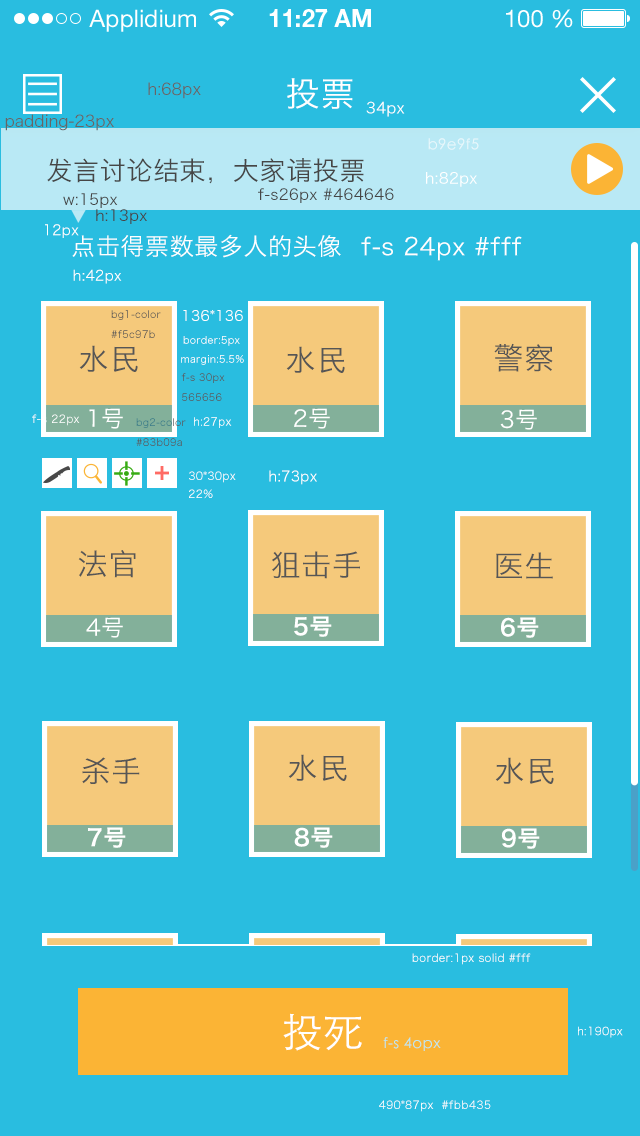
<style>
.page{position:relative;width:640px;height:1136px;background:#29bde0}
.page>*{position:absolute;margin:0}
.t1{font:34px "HiraginoSansGB-W3";letter-spacing:0.025em;color:#ffffff}
.t2{font:16px "HiraginoSansGB-W3";color:#666666}
.t3{font:15px "HiraginoSansGB-W3";letter-spacing:0.025em;color:#ffffff}
.t4{font:15px "STHeitiSC-Light";letter-spacing:0.025em;color:#e8f8fc}
.t5{font:26px "HiraginoSansGB-W3";letter-spacing:0.025em;color:#464646}
.t6{font:15px "HiraginoSansGB-W3";letter-spacing:0.025em;color:#464646}
.t7{font:14px "HiraginoSansGB-W3";letter-spacing:0.025em;color:#ffffff}
.t8{font:24px "HiraginoSansGB-W3";letter-spacing:0.025em;color:#ffffff}
.t9{font:10px/20px "HiraginoSansGB-W3";letter-spacing:0.025em}
.t10{font:10px "HiraginoSansGB-W3";letter-spacing:0.025em;color:#ffffff}
.t11{font:30px "HiraginoSansGB-W3";letter-spacing:0.025em;color:#565656}
.t12{font:10px/20px "HiraginoSansGB-W3";letter-spacing:0.025em;color:#565656}
.t13{font:11px "HiraginoSansGB-W3";letter-spacing:0.025em;color:#ffffff}
.t14{font:22.8px "HiraginoSansGB-W3";letter-spacing:0.025em;color:#ffffff}
.t15{font:11px/18px "HiraginoSansGB-W3";letter-spacing:0.025em;color:#ffffff}
.t16{font:22.8px "HiraginoSansGB-W6";letter-spacing:0.025em;color:#ffffff}
.t17{font:40px "STHeitiSC-Light";letter-spacing:0.025em;color:#ffffff}
.t18{font:15px "STHeitiSC-Light";letter-spacing:0.025em;color:#b9e9f5}
</style>
<div class="page">
<p class="t1" style="left:287px;top:78px;width:66px;height:31px">投票</p>
<p class="t2" style="left:148px;top:82px;width:53px;height:17px">h:68px</p>
<p class="t3" style="left:366px;top:101px;width:39px;height:16px">34px</p>
<p class="t2" style="left:5px;top:114px;width:109px;height:17px">padding-23px</p>
<p class="t4" style="left:428px;top:138px;width:51px;height:12px">b9e9f5</p>
<p class="t5" style="left:47px;top:158px;width:317px;height:26px">发言讨论结束，大家请投票</p>
<p class="t3" style="left:426px;top:172px;width:51px;height:15px">h:82px</p>
<p class="t6" style="left:63px;top:193px;width:55px;height:15px">w:15px</p>
<p class="t6" style="left:258px;top:188px;width:136px;height:15px">f-s26px #464646</p>
<p class="t6" style="left:96px;top:209px;width:51px;height:15px">h:13px</p>
<p class="t7" style="left:45px;top:224px;width:34px;height:14px">12px</p>
<p class="t8" style="left:72px;top:234px;width:269px;height:24px">点击得票数最多人的头像</p>
<p class="t8" style="left:361px;top:236px;width:161px;height:25px">f-s 24px #fff</p>
<p class="t7" style="left:73px;top:269px;width:49px;height:15px">h:42px</p>
<p class="t9" style="left:111px;top:310px;width:50px;height:28px">bg1-color<br>#f5c97b</p>
<p class="t7" style="left:183px;top:310px;width:60px;height:11px">136*136</p>
<p class="t10" style="left:183px;top:336px;width:57px;height:10px">border:5px</p>
<p class="t11" style="left:79px;top:345px;width:59px;height:27px">水民</p>
<p class="t11" style="left:286px;top:346px;width:59px;height:27px">水民</p>
<p class="t11" style="left:494px;top:343px;width:59px;height:29px">警察</p>
<p class="t10" style="left:181px;top:355px;width:63px;height:10px">margin:5.5%</p>
<p class="t12" style="left:181px;top:373px;width:44px;height:28px">f-s 30px<br>565656</p>
<p class="t13" style="left:32px;top:414px;width:48px;height:12px">f-s 22px</p>
<p class="t14" style="left:89px;top:408px;width:34px;height:21px">1号</p>
<p class="t14" style="left:294px;top:408px;width:36px;height:21px">2号</p>
<p class="t14" style="left:500px;top:409px;width:37px;height:21px">3号</p>
<p class="t9" style="left:136px;top:418px;width:50px;height:28px">bg2-color<br>#83b09a</p>
<p class="t13" style="left:194px;top:417px;width:38px;height:11px">h:27px</p>
<p class="t15" style="left:189px;top:471px;width:47px;height:28px">30*30px<br>22%</p>
<p class="t7" style="left:269px;top:470px;width:48px;height:15px">h:73px</p>
<p class="t11" style="left:78px;top:550px;width:58px;height:28px">法官</p>
<p class="t11" style="left:272px;top:551px;width:88px;height:28px">狙击手</p>
<p class="t11" style="left:496px;top:552px;width:57px;height:27px">医生</p>
<p class="t14" style="left:86px;top:617px;width:37px;height:21px">4号</p>
<p class="t16" style="left:294px;top:616px;width:38px;height:21px">5号</p>
<p class="t16" style="left:501px;top:617px;width:38px;height:21px">6号</p>
<p class="t11" style="left:82px;top:757px;width:58px;height:27px">杀手</p>
<p class="t11" style="left:288px;top:754px;width:59px;height:27px">水民</p>
<p class="t11" style="left:495px;top:757px;width:59px;height:27px">水民</p>
<p class="t16" style="left:88px;top:827px;width:38px;height:21px">7号</p>
<p class="t16" style="left:294px;top:827px;width:39px;height:21px">8号</p>
<p class="t16" style="left:501px;top:828px;width:39px;height:21px">9号</p>
<p class="t13" style="left:412px;top:953px;width:119px;height:12px">border:1px solid #fff</p>
<p class="t17" style="left:283px;top:1013px;width:79px;height:38px">投死</p>
<p class="t18" style="left:383px;top:1037px;width:58px;height:14px">f-s 4opx</p>
<p class="t13" style="left:578px;top:1026px;width:45px;height:12px">h:190px</p>
<p class="t13" style="left:379px;top:1100px;width:112px;height:12px">490*87px  #fbb435</p>
</div>
